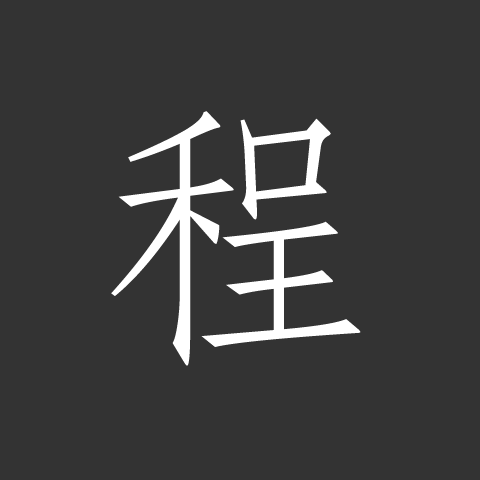
<style>
.page{position:relative;width:480px;height:480px;background:#333333}
.page>*{position:absolute;margin:0}
.t1{font:288px "STFangsong";color:#ffffff}
</style>
<div class="page">
<p class="t1" style="left:111px;top:111px;width:250px;height:255px">程</p>
</div>
